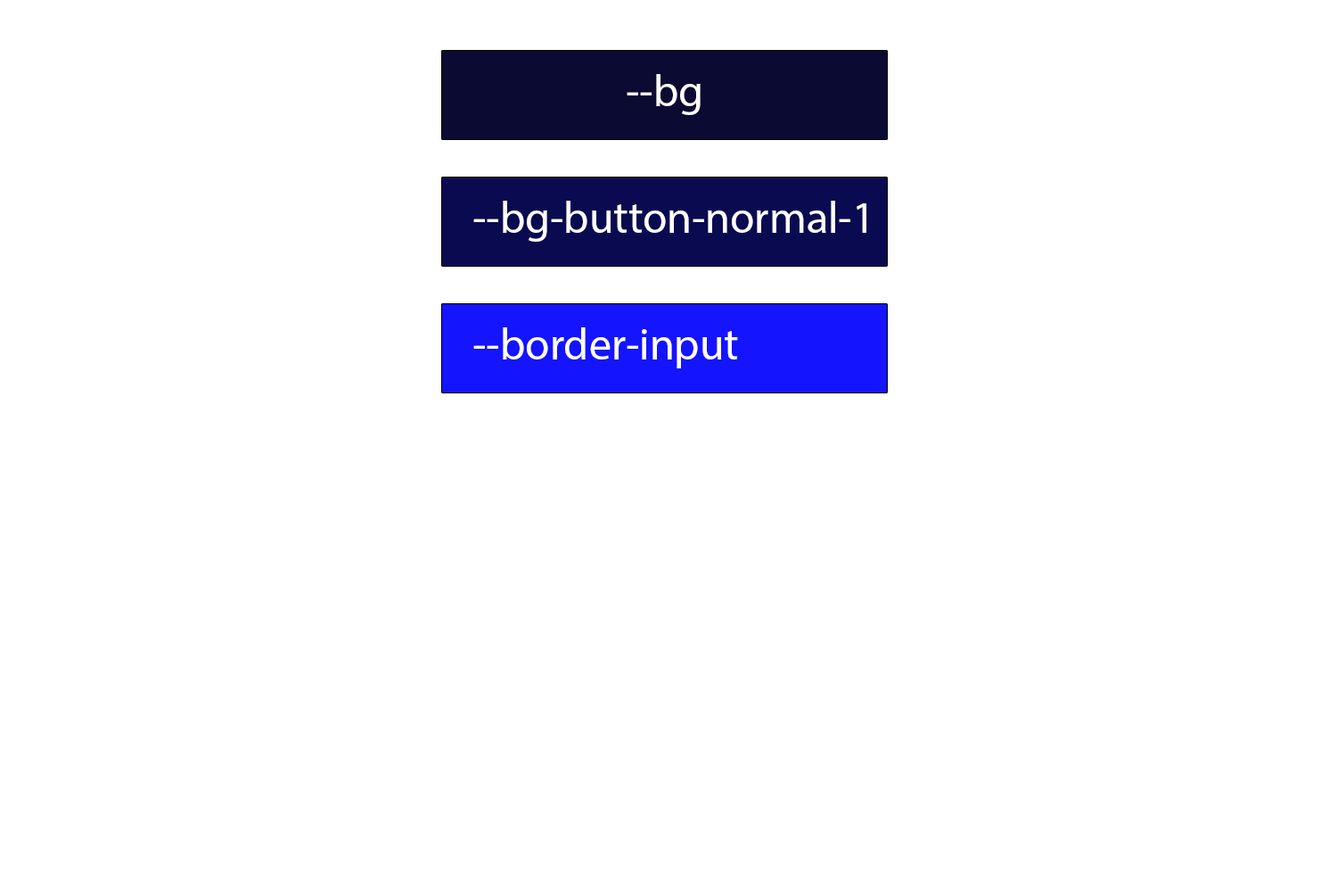
<style>
.page{position:relative;width:1337px;height:892px;background:#ffffff}
.page>*{position:absolute;margin:0}
.t1{font:44.6px "MyriadPro-Regular";color:#ffffff}
</style>
<div class="page">
<p class="t1" style="left:627px;top:74px;width:74px;height:41px">--bg</p>
<p class="t1" style="left:473px;top:201px;width:394px;height:41px">--bg-button-normal-1</p>
<p class="t1" style="left:473px;top:327px;width:265px;height:41px">--border-input</p>
</div>
